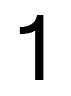
<style>
.page{position:relative;width:71px;height:96px;background:#ffffff}
.page>*{position:absolute;margin:0}
.t1{font:89.4px "MicrosoftSansSerif";color:#000000}
</style>
<div class="page">
<p class="t1" style="left:19px;top:15px;width:25px;height:65px">1</p>
</div>
